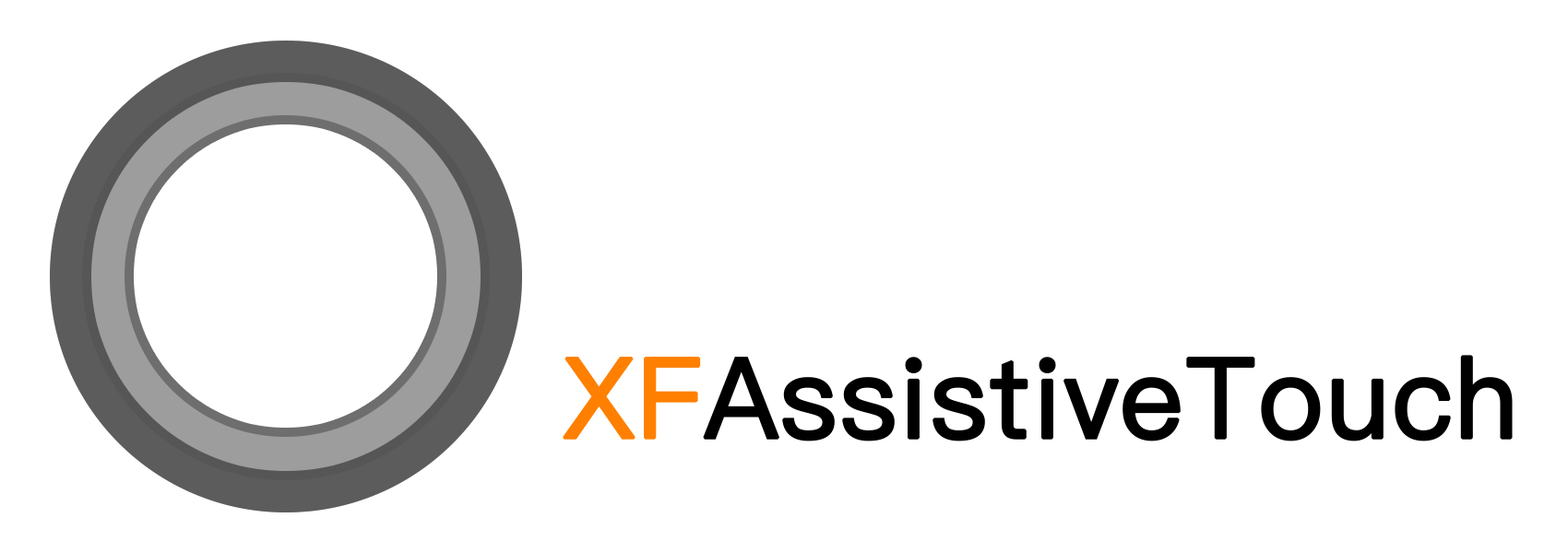
<style>
.page{position:relative;width:1568px;height:553px;background:#ffffff}
.page>*{position:absolute;margin:0}
.t1{font:111.5px "PingFangSC-Regular";color:#000000;font-weight:bold}
.t2{font:111.5px "PingFangSC-Regular";color:#ff8000;font-weight:bold}
</style>
<div class="page">
<p class="t1" style="left:563px;top:355px;width:950px;height:87px"><span class="t2">XF</span>AssistiveTouch</p>
</div>
